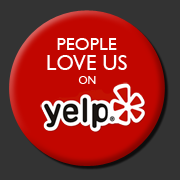
<style>
.page{position:relative;width:180px;height:180px;background:#333333}
.page>*{position:absolute;margin:0}
.t1{font:21.3px/19.7px "GillSans";color:#ffffff}
.t2{font:18.1px/19.7px "GillSans";color:#ffffff}
.t3{font:11.1px "GillSans";color:#ffffff}
</style>
<div class="page">
<p class="t1" style="left:47px;top:38px;width:80px;height:32px;text-align:center"><span class="t2">PEOPLE<br></span>LOVE US</p>
<p class="t3" style="left:78px;top:76px;width:18px;height:8px">ON</p>
</div>
